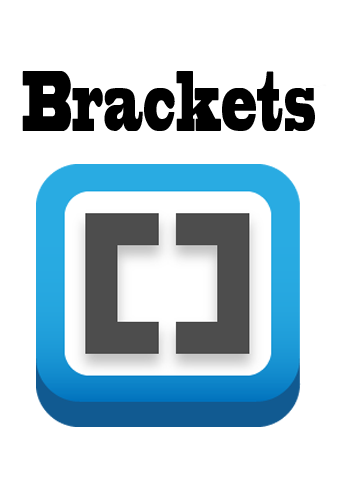
<style>
.page{position:relative;width:340px;height:485px;background:#ffffff}
.page>*{position:absolute;margin:0}
.t1{font:80px "BlackoakStd";color:#000000;scale:0.34 1}
</style>
<div class="page">
<p class="t1" style="left:22px;top:71px;width:293px;height:60px">Brackets</p>
</div>
